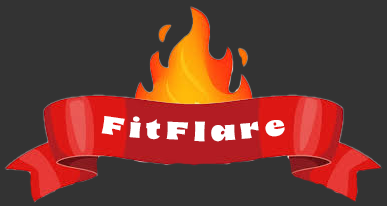
<style>
.page{position:relative;width:387px;height:206px;background:#333333}
.page>*{position:absolute;margin:0}
.t1{font:29px "8-Heavy";color:#ffffff}
.t2{font:29px "8-Heavy";color:#000000}
.t3{font:48px "8-Heavy";color:#000000}
</style>
<div class="page">
<p class="t1" style="left:101px;top:116px;width:184px;height:26px"><span class="t2">   </span>F i t F l a r e      <span class="t3">FitFlare</span></p>
</div>
